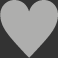
<style>
.page{position:relative;width:58px;height:58px;background:#aeaead}
.page>*{position:absolute;margin:0}
.t1{font:72px "KozGoPr6N-Regular";color:#aeaead}
</style>
<div class="page">
<p class="t1" style="left:0px;top:0px;width:58px;height:58px">♥</p>
</div>
